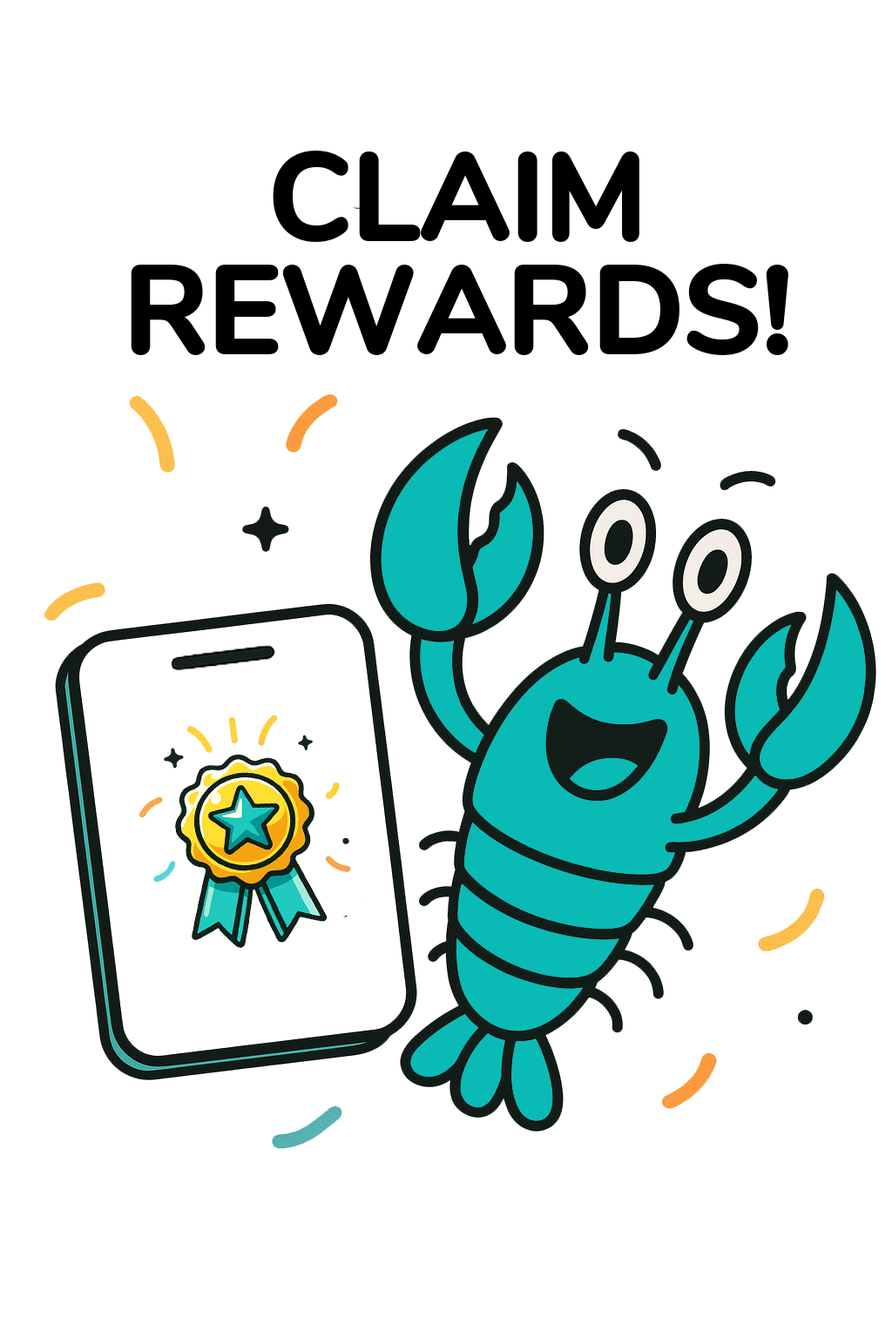
<style>
.page{position:relative;width:892px;height:1337px;background:#ffffff}
.page>*{position:absolute;margin:0}
.t1{font:121.9px/113.2px "Nunito-Bold";letter-spacing:-0.025em;color:#000000;font-weight:bold}
</style>
<div class="page">
<p class="t1" style="left:131px;top:151px;width:657px;height:204px;text-align:center">CLAIM<br>REWARDS!</p>
</div>
